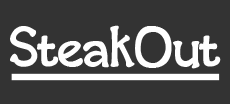
<style>
.page{position:relative;width:230px;height:104px;background:#333333}
.page>*{position:absolute;margin:0}
.t1{font:46.5px "secondbreakfast";color:#fefefe}
</style>
<div class="page">
<p class="t1" style="left:10px;top:25px;width:211px;height:44px">SteakOut</p>
</div>
